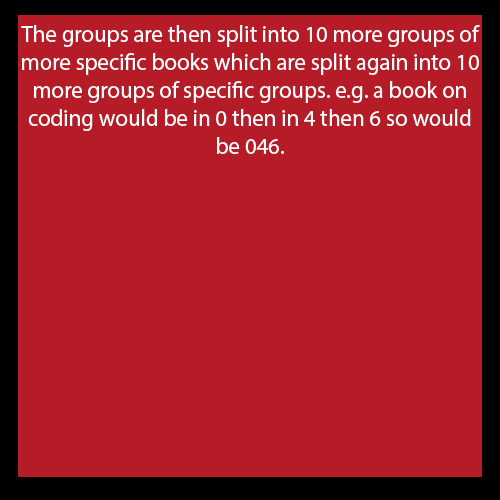
<style>
.page{position:relative;width:500px;height:500px;background:#b61c27}
.page>*{position:absolute;margin:0}
.t1{font:23.3px "MyriadPro-Regular";color:#ffffff}
</style>
<div class="page">
<p class="t1" style="left:21px;top:25px;width:459px;height:129px;text-align:center">The groups are then split into 10 more groups of more specific books which are split again into 10 more groups of specific groups. e.g. a book on coding would be in 0 then in 4 then 6 so would be 046.</p>
</div>
